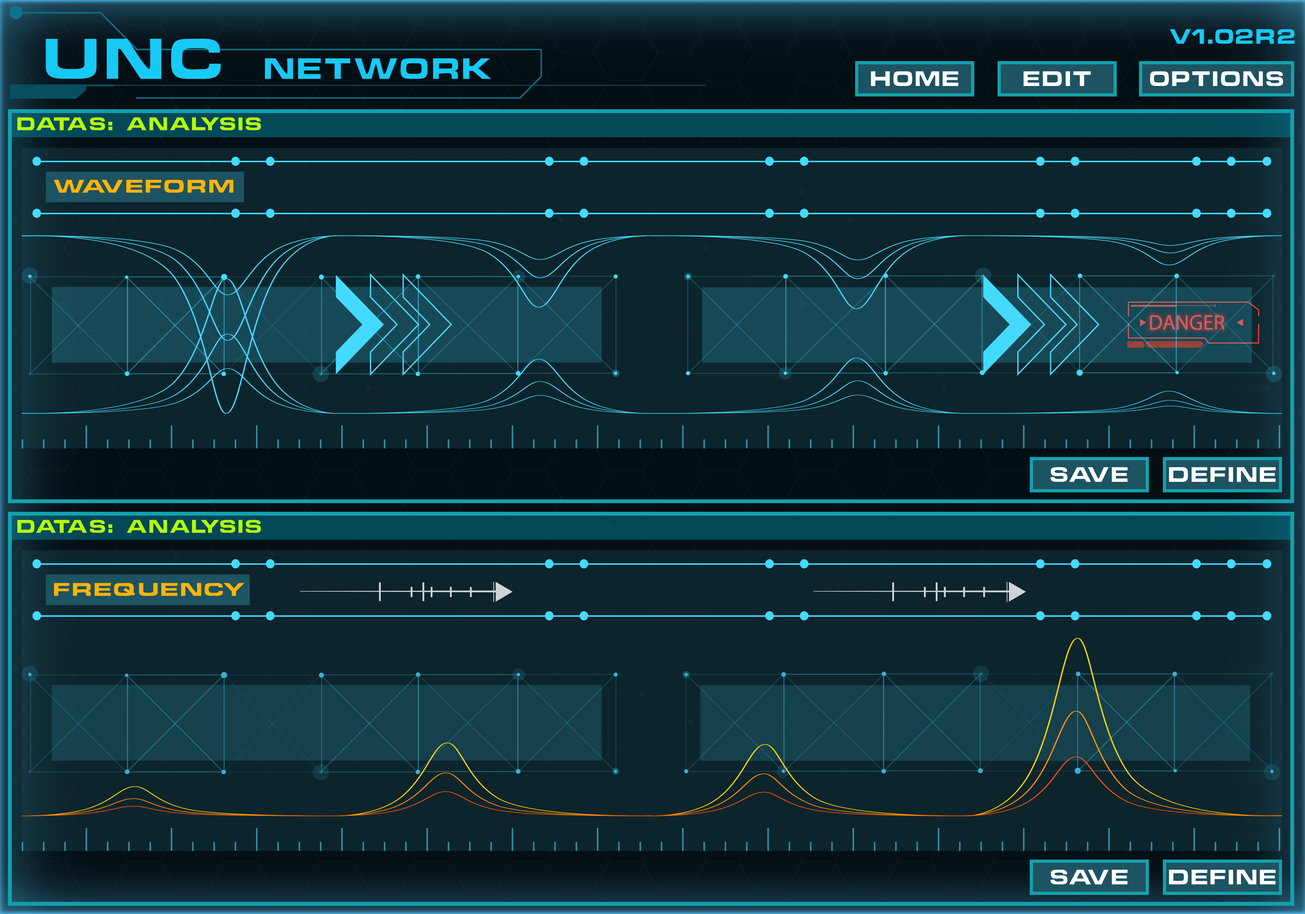
<style>
.page{position:relative;width:1305px;height:914px;background:#0c242c}
.page>*{position:absolute;margin:0}
.t1{font:19.1px "ChinoCapsSSK";letter-spacing:0.12em;color:#17c9f5}
.t2{font:26.9px "ChinoCapsSSK";letter-spacing:0.12em;color:#17c9f5}
.t3{font:52.4px "ChinoCapsSSK";letter-spacing:0.12em;color:#17c9f5}
.t4{font:19.2px "ChinoCapsSSK";letter-spacing:0.12em;color:#ffffff}
.t5{font:16.8px "ChinoCapsSSK";letter-spacing:0.12em;color:#b4ff00}
.t6{font:16.8px "ChinoCapsSSK";letter-spacing:0.12em;color:#ffb401;scale:1.14 1}
</style>
<div class="page">
<p class="t1" style="left:1169px;top:29px;width:125px;height:15px">V1.02R2</p>
<p class="t2" style="left:46px;top:39px;width:445px;height:40px"><span class="t3">UNC </span>NETWORK</p>
<p class="t4" style="left:870px;top:71px;width:88px;height:15px">HOME</p>
<p class="t4" style="left:1023px;top:71px;width:68px;height:15px">EDIT</p>
<p class="t4" style="left:1149px;top:71px;width:134px;height:15px">OPTIONS</p>
<p class="t5" style="left:17px;top:117px;width:244px;height:13px">DATAS: ANALYSIS</p>
<p class="t6" style="left:54px;top:180px;width:179px;height:13px">WAVEFORM</p>
<p class="t4" style="left:1050px;top:467px;width:77px;height:15px">SAVE</p>
<p class="t4" style="left:1169px;top:467px;width:106px;height:15px">DEFINE</p>
<p class="t5" style="left:17px;top:520px;width:244px;height:13px">DATAS: ANALYSIS</p>
<p class="t6" style="left:54px;top:583px;width:190px;height:13px">FREQUENCY</p>
<p class="t4" style="left:1050px;top:870px;width:77px;height:14px">SAVE</p>
<p class="t4" style="left:1169px;top:870px;width:106px;height:14px">DEFINE</p>
</div>
